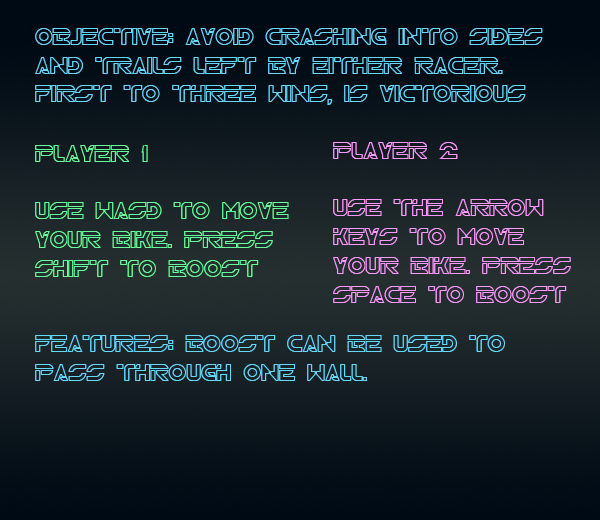
<style>
.page{position:relative;width:600px;height:520px}
.page>*{position:absolute;margin:0}
.t1{font:24px "TRN";color:#66d9ff}
.t2{font:24px "TRN";color:#66ff99}
.t3{font:24px "TRN";color:#ff99ff}
</style>
<div class="page">
<p class="t1" style="left:35px;top:28px;width:508px;height:77px">Objective: Avoid crashing into sides and trails left by either racer. First to three wins, is victorious</p>
<p class="t2" style="left:35px;top:145px;width:254px;height:132px">Player 1<br><br>use wasd to move<br>your bike. Press shift to boost</p>
<p class="t3" style="left:333px;top:142px;width:238px;height:161px">Player 2<br><br>use the arrow keys to move<br>your bike. Press space to boost</p>
<p class="t1" style="left:35px;top:335px;width:470px;height:46px">Features: boost can be used to pass through one wall.</p>
</div>
